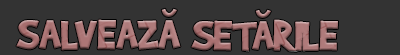
<style>
.page{position:relative;width:400px;height:55px;background:#333333}
.page>*{position:absolute;margin:0}
.t1{font:50px "Brady-Bunch";color:#ab7676}
</style>
<div class="page">
<p class="t1" style="left:16px;top:19px;width:322px;height:33px">SALVEAZA SETARILE</p>
</div>
